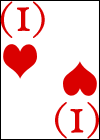
<style>
.page{position:relative;width:100px;height:140px;background:#ffffff}
.page>*{position:absolute;margin:0}
.t1{font:40px "HighTowerText-Reg";color:#da0000}
.t2{font:60px "HighTowerText-Reg";color:#da0000}
</style>
<div class="page">
<p class="t1" style="left:0px;top:1px;width:45px;height:37px">(<span class="t2">1</span>)</p>
<p class="t1" style="left:55px;top:102px;width:44px;height:37px;rotate:180deg">(<span class="t2">1</span>)</p>
</div>
